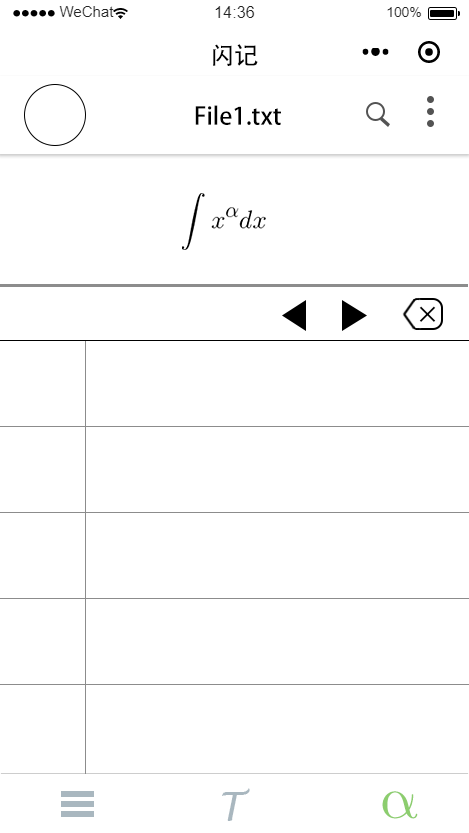
<style>
.page{position:relative;width:469px;height:833px;background:#ffffff}
.page>*{position:absolute;margin:0}
.t1{font:24px "AdobeHeitiStd-Regular";color:#000000}
.t2{font:40px "LucidaHandwriting-Italic";color:#a9b7bf}
.t3{font:60px "LatinModernMath-Regular";color:#8ccd6e}
</style>
<div class="page">
<p class="t1" style="left:213px;top:44px;width:45px;height:22px">闪记</p>
<p class="t1" style="left:195px;top:105px;width:86px;height:20px">File1.txt</p>
<p class="t1" style="left:419px;top:306px;width:17px;height:16px">×</p>
<p class="t2" style="left:222px;top:788px;width:28px;height:33px">T</p>
<p class="t3" style="left:382px;top:791px;width:36px;height:28px">α</p>
</div>
